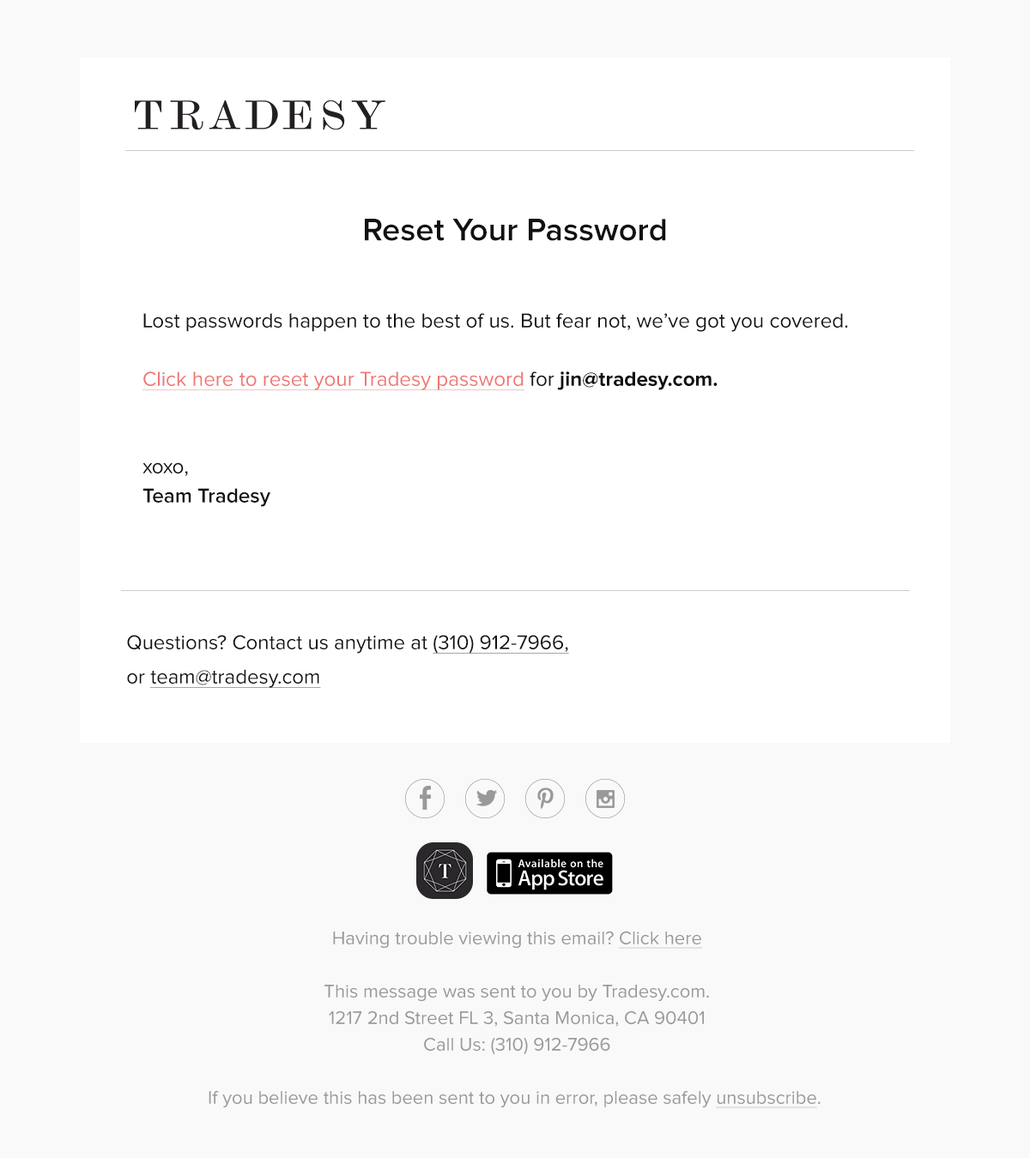
<style>
.page{position:relative;width:1030px;height:1158px;background:#ffffff}
.page>*{position:absolute;margin:0}
.t1{font:32.6px "ProximaNova-Semibold";color:#111111}
.t2{font:20.7px/29.2px "ProximaNova-Regular";color:#111111}
.t3{font:20.7px/29.2px "ProximaNova-Regular";color:#ee7873;text-decoration:underline}
.t4{font:20.7px/29.2px "ProximaNova-Bold";color:#111111}
.t5{font:20.7px/29.2px "ProximaNova-Semibold";color:#111111}
.t6{font:20.6px/34.3px "ProximaNova-Regular";color:#111111}
.t7{font:20.6px/34.3px "ProximaNova-Regular";color:#111111;text-decoration:underline}
.t8{font:18.9px/26.6px "ProximaNova-Regular";color:#999999}
.t9{font:18.9px/26.6px "ProximaNova-Regular";color:#999999;text-decoration:underline}
</style>
<div class="page">
<p class="t1" style="left:365px;top:219px;width:301px;height:22px">Reset Your Password</p>
<p class="t2" style="left:142px;top:313px;width:706px;height:194px">Lost passwords happen to the best of us. But fear not, we’ve got you covered.<br><br><span class="t3">Click here to reset your Tradesy password</span> for <span class="t4">jin@tradesy.com.<br></span><br><br>xoxo,<br><span class="t5">Team Tradesy</span></p>
<p class="t6" style="left:127px;top:635px;width:442px;height:53px">Questions? Contact us anytime at <span class="t7">(310) 912-7966,<br></span>or <span class="t7">team@tradesy.com</span></p>
<p class="t8" style="left:208px;top:931px;width:612px;height:177px;text-align:center">Having trouble viewing this email? <span class="t9">Click here<br></span><br>This message was sent to you by Tradesy.com.<br>1217 2nd Street FL 3, Santa Monica, CA 90401<br>Call Us: (310) 912-7966<br><br>If you believe this has been sent to you in error, please safely <span class="t9">unsubscribe</span>.</p>
</div>
